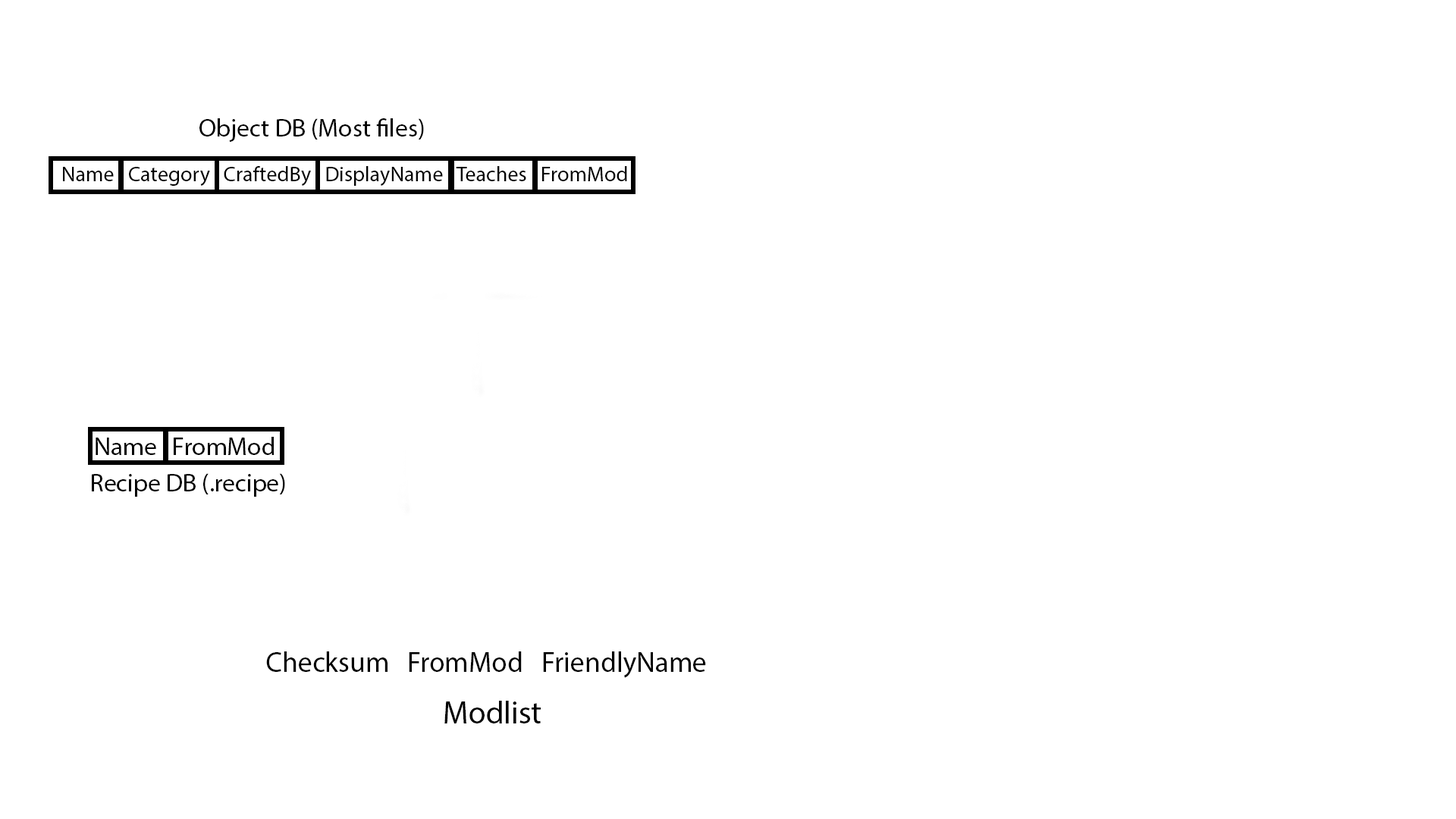
<style>
.page{position:relative;width:1456px;height:819px;background:#ffffff}
.page>*{position:absolute;margin:0}
.t1{font:25.3px "MyriadPro-Regular";color:#000000}
.t2{font:21.4px "MyriadPro-Regular";color:#000000}
.t3{font:28.4px "MyriadPro-Regular";color:#000000}
.t4{font:31.6px "MyriadPro-Regular";color:#000000}
</style>
<div class="page">
<p class="t1" style="left:199px;top:118px;width:225px;height:24px">Object DB (Most files)</p>
<p class="t2" style="left:63px;top:166px;width:564px;height:20px">Name   Category   CraftedBy   DisplayName   Teaches   FromMod</p>
<p class="t1" style="left:96px;top:437px;width:178px;height:18px">Name   FromMod</p>
<p class="t1" style="left:92px;top:473px;width:193px;height:24px">Recipe DB (.recipe)</p>
<p class="t3" style="left:266px;top:651px;width:440px;height:27px">Checksum   FromMod   FriendlyName</p>
<p class="t4" style="left:444px;top:701px;width:97px;height:22px">Modlist</p>
</div>
